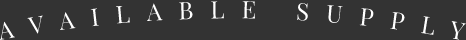
<style>
.page{position:relative;width:466px;height:40px;background:#333333}
.page>*{position:absolute;margin:0}
.t1{font:24px "PlayfairDisplay-Regular";letter-spacing:0.7em;color:#ffffff;text-transform:uppercase}
</style>
<div class="page">
<p class="t1" style="left:0px;top:1px;width:466px;height:39px">available supply</p>
</div>
